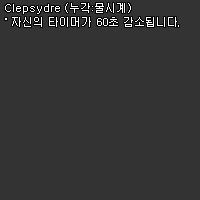
<style>
.page{position:relative;width:200px;height:200px;background:#333333}
.page>*{position:absolute;margin:0}
.t1{font:11px/14px "Dotum";color:#ffffff}
</style>
<div class="page">
<p class="t1" style="left:5px;top:3px;width:174px;height:24px">Clepsydre (누각:물시계)<br>˚ 자신의 타이머가 60초 감소됩니다.</p>
</div>
